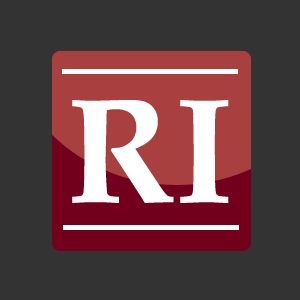
<style>
.page{position:relative;width:300px;height:300px;background:#333333}
.page>*{position:absolute;margin:0}
.t1{font:150px "BookAntiqua-Bold";color:#ffffff}
</style>
<div class="page">
<p class="t1" style="left:72px;top:100px;width:157px;height:103px">RI</p>
</div>
